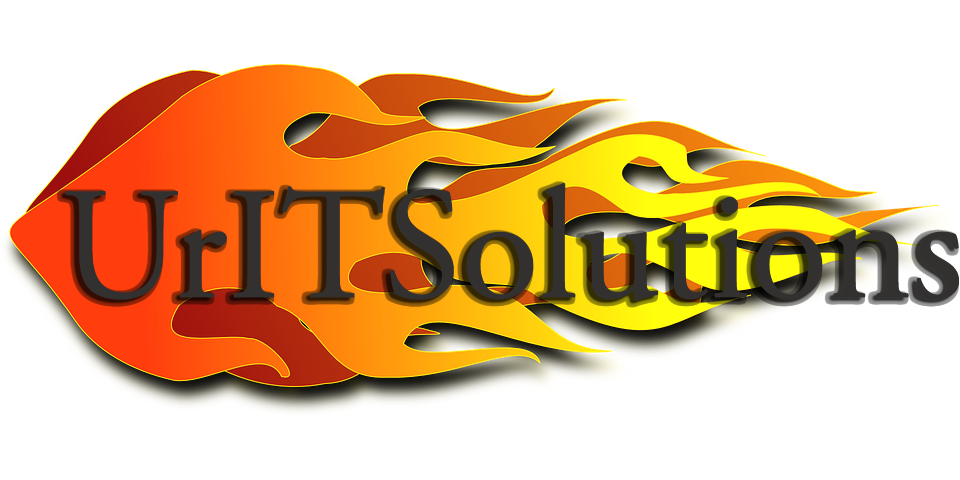
<style>
.page{position:relative;width:960px;height:480px;background:#ffffff}
.page>*{position:absolute;margin:0}
.t1{font:160px "AGaramondPro-Regular";color:#333030}
</style>
<div class="page">
<p class="t1" style="left:65px;top:182px;width:894px;height:119px">UrITSolutions</p>
</div>
